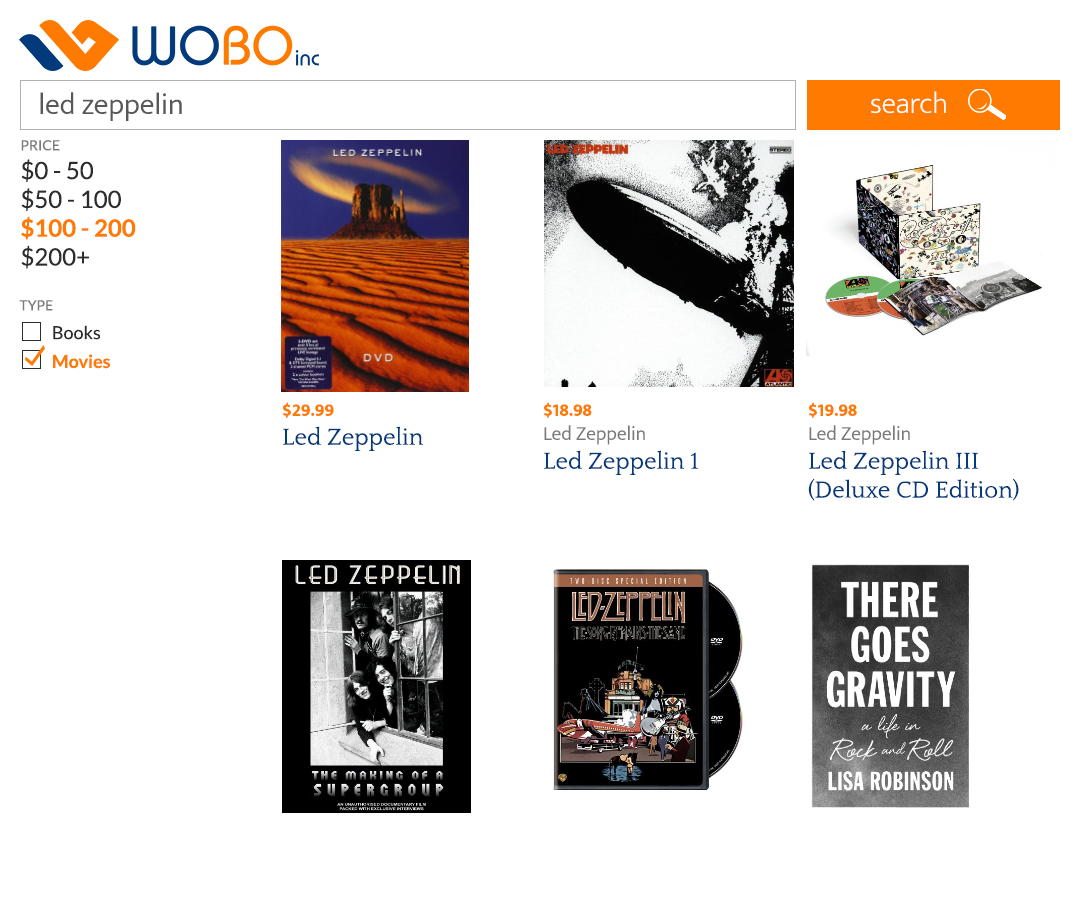
<style>
.page{position:relative;width:1080px;height:900px;background:#ffffff}
.page>*{position:absolute;margin:0}
.t1{font:30px "EkMukta-Light";color:#595858}
.t2{font:30px "EkMukta-ExtraLight";color:#ffffff}
.t3{font:24px "Lato-Regular";color:#2d2d2d}
.t4{font:14px "Lato-Regular";color:#7b7b7b;text-transform:uppercase}
.t5{font:24px "Lato-Bold";color:#fe7a00}
.t6{font:18px "Lato-Bold";color:#fe7a00}
.t7{font:18px "Lato-Regular";color:#2d2d2d}
.t8{font:24px "Quattrocento";color:#033a7b}
.t9{font:18px "EkMukta-Bold";color:#fe7a00}
.t10{font:20px "EkMukta-Light";color:#7b7b7b}
</style>
<div class="page">
<p class="t1" style="left:40px;top:92px;width:142px;height:29px">led zeppelin</p>
<p class="t2" style="left:871px;top:91px;width:75px;height:23px">search</p>
<p class="t3" style="left:21px;top:140px;width:115px;height:129px"><span class="t4">Price<br></span>$0 - 50<br>$50 - 100<br><span class="t5">$100 - 200<br></span>$200+</p>
<p class="t6" style="left:19px;top:300px;width:91px;height:69px"><span class="t4">Type<br>       </span><span class="t7">Books<br>       </span>Movies</p>
<p class="t8" style="left:283px;top:402px;width:140px;height:49px"><span class="t9">$29.99<br></span>Led Zeppelin</p>
<p class="t8" style="left:544px;top:402px;width:154px;height:73px"><span class="t9">$18.98<br></span><span class="t10">Led Zeppelin<br></span>Led Zeppelin 1</p>
<p class="t8" style="left:808px;top:402px;width:211px;height:99px"><span class="t9">$19.98<br></span><span class="t10">Led Zeppelin<br></span>Led Zeppelin III (Deluxe CD Edition)</p>
</div>
